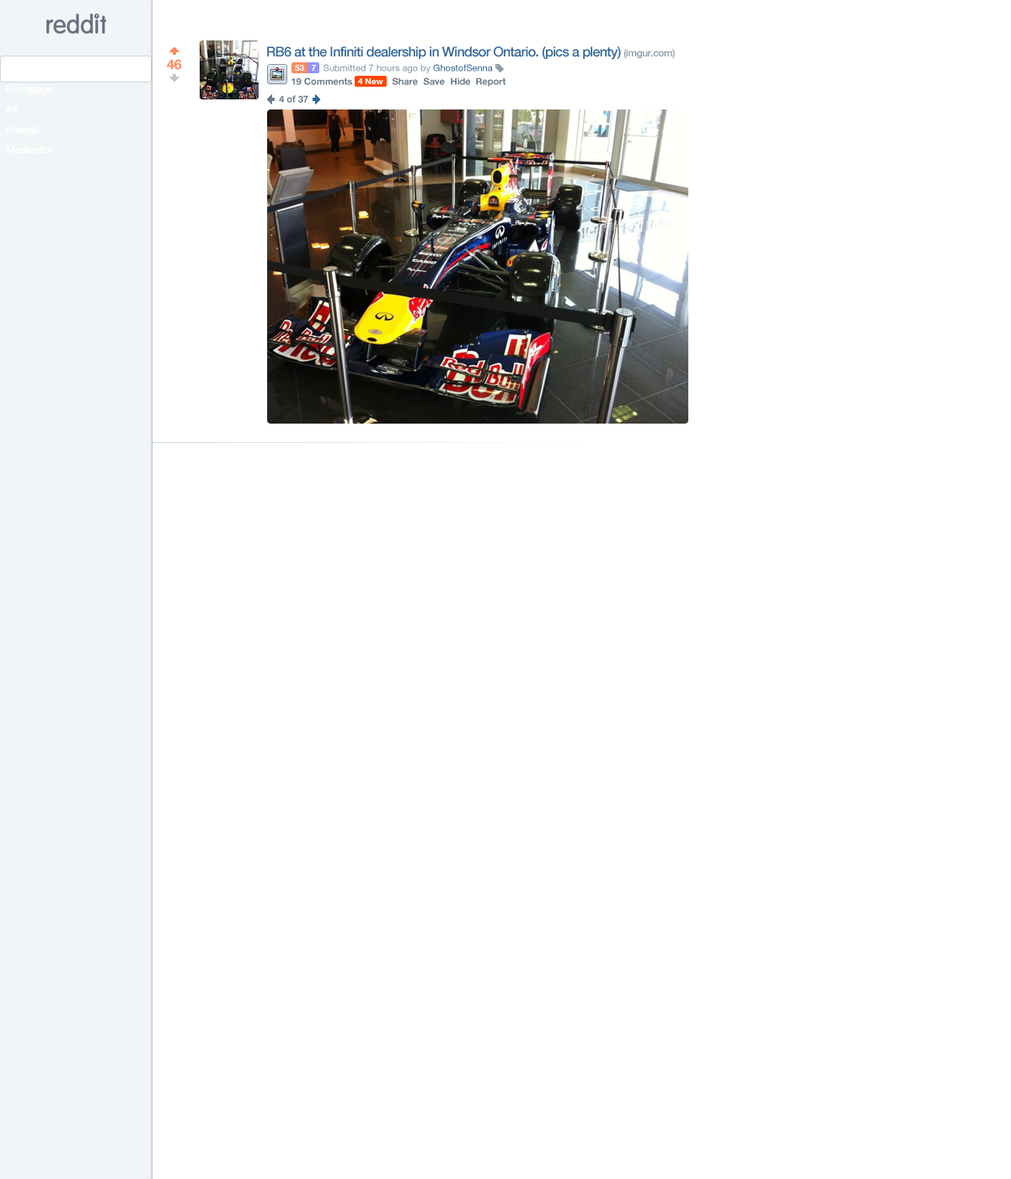
<style>
.page{position:relative;width:1011px;height:1179px;background:#ffffff}
.page>*{position:absolute;margin:0}
.t1{font:13.5px "HelveticaNeue-Medium";letter-spacing:-0.04em;color:#336699}
.t2{font:10.1px "HelveticaNeue-Medium";letter-spacing:-0.04em;color:#8595a6}
.t3{font:13.5px "HelveticaNeue-Bold";color:#ff8b60}
.t4{font:8.4px "HelveticaNeue-Bold";color:#ffffff}
.t5{font:9.3px "HelveticaNeue";color:#8595a6}
.t6{font:9.3px "HelveticaNeue";color:#336699}
.t7{font:9.3px "HelveticaNeue-Bold";color:#6e7b8a}
.t8{font:10.1px "HelveticaNeue-Bold";letter-spacing:-0.04em;color:#ffffff}
</style>
<div class="page">
<p class="t1" style="left:267px;top:46px;width:408px;height:14px">RB6 at the Infiniti dealership in Windsor Ontario. (pics a plenty) <span class="t2">(imgur.com)</span></p>
<p class="t3" style="left:167px;top:59px;width:15px;height:11px">46</p>
<p class="t4" style="left:295px;top:65px;width:9px;height:6px">53</p>
<p class="t4" style="left:311px;top:65px;width:5px;height:6px">7</p>
<p class="t5" style="left:324px;top:64px;width:169px;height:9px">Submitted 7 hours ago by <span class="t6">GhostofSenna</span></p>
<p class="t7" style="left:291px;top:78px;width:61px;height:7px">19 Comments</p>
<p class="t7" style="left:392px;top:78px;width:26px;height:7px">Share</p>
<p class="t7" style="left:423px;top:78px;width:22px;height:7px">Save</p>
<p class="t7" style="left:451px;top:78px;width:19px;height:7px">Hide</p>
<p class="t7" style="left:476px;top:78px;width:30px;height:9px">Report</p>
<p class="t8" style="left:6px;top:85px;width:46px;height:10px">Frontpage</p>
<p class="t4" style="left:358px;top:78px;width:25px;height:6px">4 New</p>
<p class="t7" style="left:279px;top:95px;width:29px;height:8px">4 of 37</p>
<p class="t8" style="left:6px;top:105px;width:11px;height:8px">All</p>
<p class="t8" style="left:6px;top:126px;width:34px;height:8px">Friends</p>
<p class="t8" style="left:6px;top:146px;width:48px;height:8px">Moderator</p>
</div>
